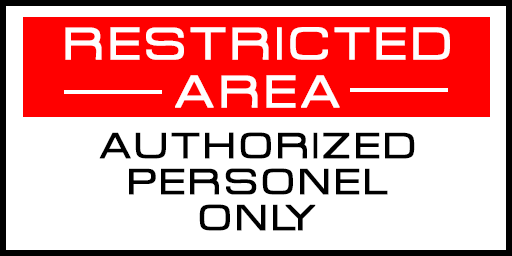
<style>
.page{position:relative;width:512px;height:256px;background:#ffffff}
.page>*{position:absolute;margin:0}
.t1{font:50px/48px "Acens";letter-spacing:0.1em;color:#fefefe;font-weight:bold}
.t2{font:40px/36px "Acens";letter-spacing:0.1em;color:#000000;font-weight:bold}
</style>
<div class="page">
<p class="t1" style="left:65px;top:27px;width:385px;height:81px;text-align:center">RESTRICTED<br>AREA</p>
<p class="t2" style="left:99px;top:132px;width:316px;height:99px;text-align:center">AUTHORIZED<br>PERSONEL<br>ONLY</p>
</div>
